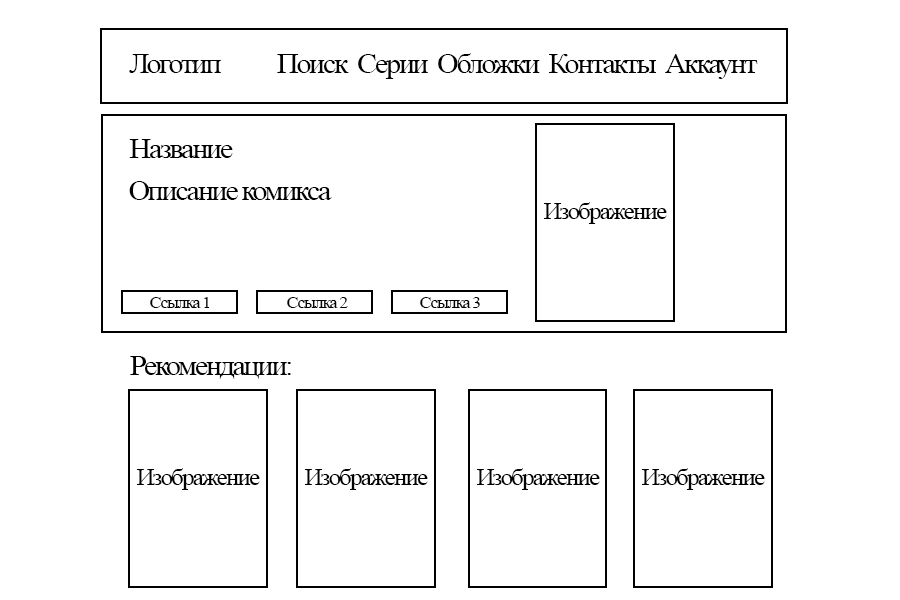
<style>
.page{position:relative;width:900px;height:600px;background:#ffffff}
.page>*{position:absolute;margin:0}
.t1{font:28.5px "TimesNewRomanPSMT";letter-spacing:-0.075em;color:#010101;scale:1.05 1}
.t2{font:23.8px "TimesNewRomanPSMT";letter-spacing:-0.075em;color:#010101;scale:1.05 1}
.t3{font:17.1px "TimesNewRomanPSMT";letter-spacing:-0.075em;color:#010101;scale:1.05 1}
</style>
<div class="page">
<p class="t1" style="left:129px;top:53px;width:629px;height:26px">Логотип           Поиск  Серии  Обложки  Контакты  Аккаунт</p>
<p class="t1" style="left:129px;top:139px;width:104px;height:19px">Название</p>
<p class="t1" style="left:129px;top:181px;width:203px;height:19px">Описание комикса</p>
<p class="t2" style="left:543px;top:202px;width:124px;height:22px">Изображение</p>
<p class="t3" style="left:150px;top:297px;width:60px;height:11px">Ссылка 1</p>
<p class="t3" style="left:287px;top:297px;width:61px;height:11px">Ссылка 2</p>
<p class="t3" style="left:420px;top:297px;width:60px;height:11px">Ссылка 3</p>
<p class="t1" style="left:130px;top:356px;width:161px;height:23px">Рекомендации:</p>
<p class="t2" style="left:136px;top:468px;width:124px;height:22px">Изображение</p>
<p class="t2" style="left:304px;top:468px;width:124px;height:22px">Изображение</p>
<p class="t2" style="left:476px;top:468px;width:124px;height:22px">Изображение</p>
<p class="t2" style="left:641px;top:468px;width:124px;height:22px">Изображение</p>
</div>
